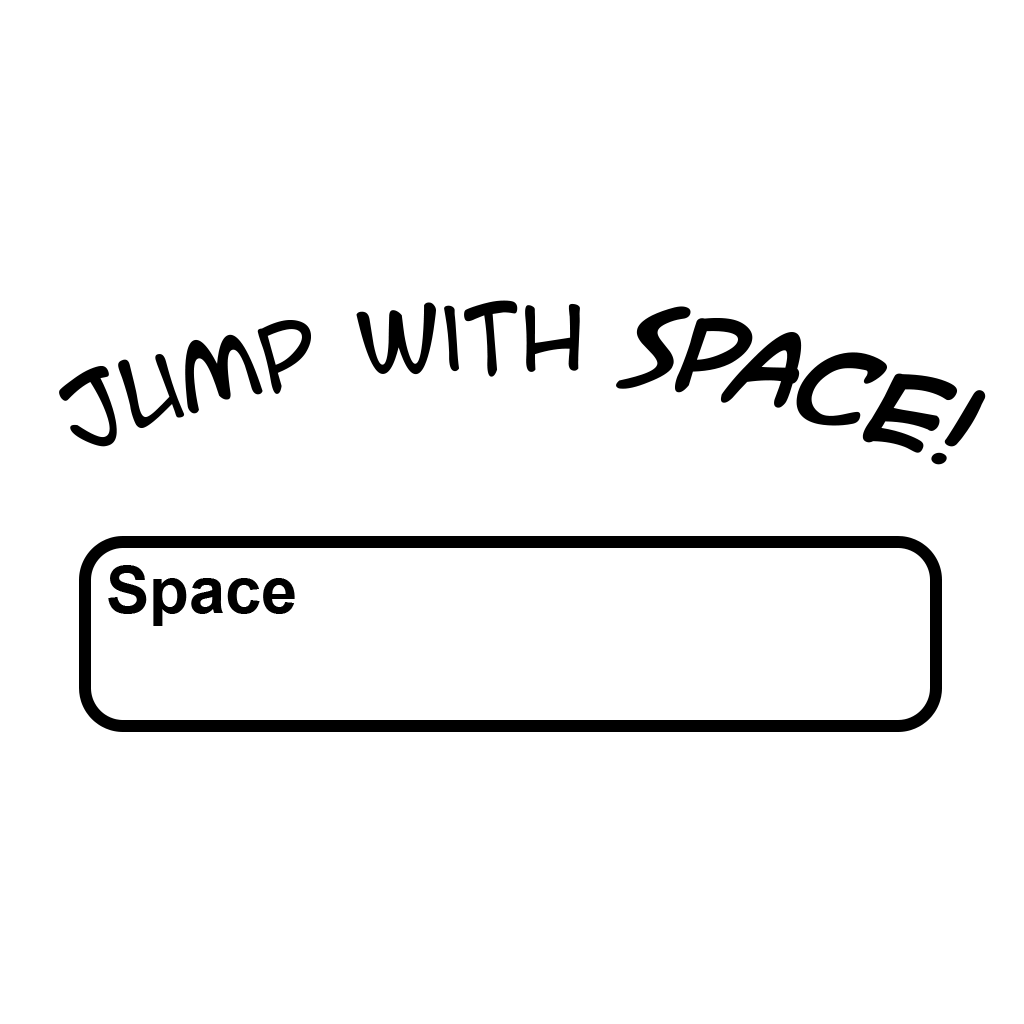
<style>
.page{position:relative;width:1024px;height:1024px;background:#ffffff}
.page>*{position:absolute;margin:0}
.t1{font:125.2px "ACMESecretAgentBB";color:#000000}
.t2{font:125.2px "ACMESecretAgentBB-BoldItalic";color:#000000}
.t3{font:64.9px "Arial-BoldMT";color:#000000}
</style>
<div class="page">
<p class="t1" style="left:59px;top:300px;width:927px;height:165px;rotate:1deg">Jump with <span class="t2">Space</span>!</p>
<p class="t3" style="left:108px;top:565px;width:187px;height:61px">Space</p>
</div>
